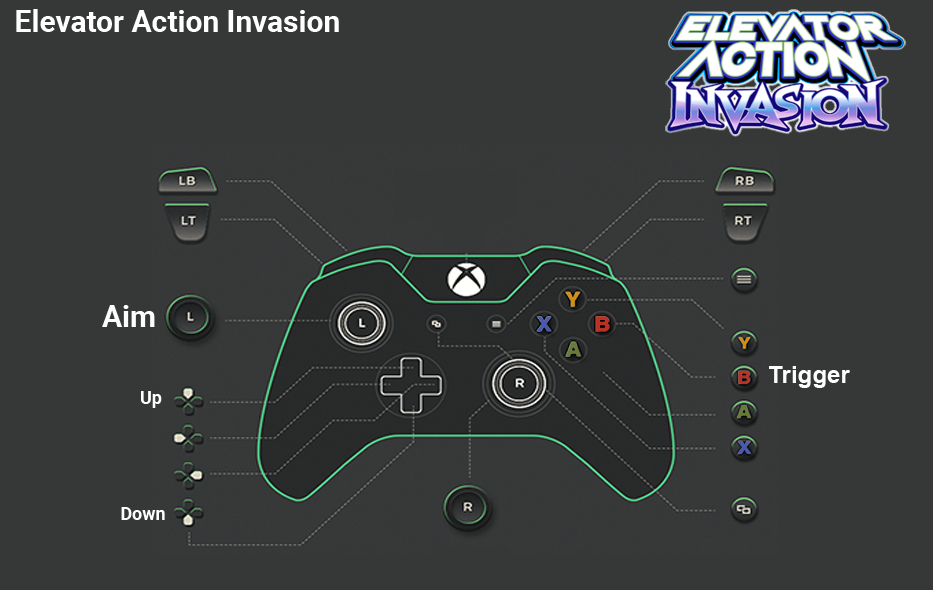
<style>
.page{position:relative;width:933px;height:590px;background:#363838}
.page>*{position:absolute;margin:0}
.t1{font:30px "Roboto-Bold";color:#ffffff}
.t2{font:30px "Roboto-Bold";color:#fefefe}
.t3{font:24px "Arial-BoldMT";color:#fefefe}
.t4{font:18px "Roboto-Bold";color:#ffffff}
</style>
<div class="page">
<p class="t1" style="left:16px;top:9px;width:323px;height:23px">Elevator Action Invasion</p>
<p class="t2" style="left:102px;top:305px;width:53px;height:22px">Aim</p>
<p class="t3" style="left:769px;top:366px;width:81px;height:22px">Trigger</p>
<p class="t4" style="left:141px;top:391px;width:21px;height:17px">Up</p>
<p class="t4" style="left:121px;top:507px;width:44px;height:13px">Down</p>
</div>
